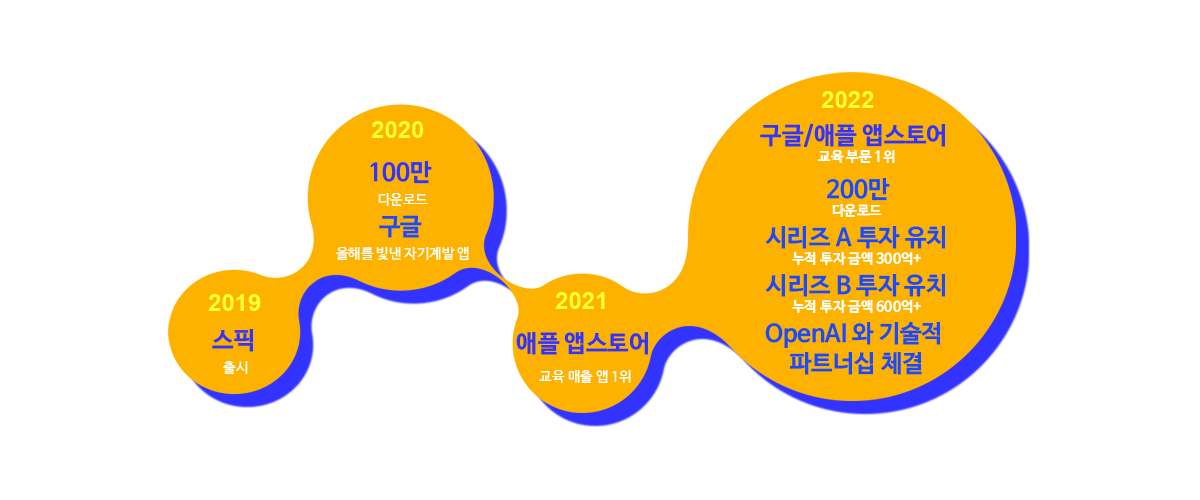
<style>
.page{position:relative;width:1200px;height:500px;background:#ffffff}
.page>*{position:absolute;margin:0}
.t1{font:24px "Arial-BoldMT";color:#ffff33}
.t2{font:24px/30px "NanumBarunGothicOTFBold";color:#1c49ff}
.t3{font:24px "NanumBarunGothicOTFBold";color:#3333ff}
.t4{font:14px/18px "NanumBarunGothicOTFBold";color:#ffffff}
.t5{font:24px/36px "NanumBarunGothicOTFBold";color:#1c49ff}
.t6{font:14px/24px "NanumBarunGothicOTF";color:#ffffff}
.t7{font:14px/30px "NanumBarunGothicOTF";color:#ffffff}
</style>
<div class="page">
<p class="t1" style="left:821px;top:91px;width:53px;height:17px">2022</p>
<p class="t1" style="left:371px;top:121px;width:53px;height:17px">2020</p>
<p class="t2" style="left:760px;top:123px;width:185px;height:252px;text-align:center"><span class="t3">구글/애플 앱스토어 <br></span><span class="t4">교육 부문 1위<br> </span><span class="t5">200만 <br></span><span class="t4">다운로드<br></span>시리즈 A 투자 유치<br><span class="t4">누적 투자 금액 300억+<br></span>시리즈 B 투자 유치<br><span class="t4">누적 투자 금액 600억+<br></span>OpenAI 와 기술적 <br>파트너십 체결</p>
<p class="t6" style="left:336px;top:161px;width:133px;height:99px;text-align:center"><span class="t3">100만 <br></span>다운로드<br><span class="t2">구글 <br></span>올해를 빛낸 자기계발 앱</p>
<p class="t1" style="left:208px;top:294px;width:53px;height:17px">2019</p>
<p class="t1" style="left:555px;top:292px;width:50px;height:17px">2021</p>
<p class="t3" style="left:212px;top:329px;width:41px;height:45px;text-align:center">스픽 <br><span class="t6">출시</span></p>
<p class="t7" style="left:516px;top:332px;width:132px;height:51px;text-align:center"><span class="t3">애플 앱스토어 <br></span>교육 매출 앱 1위</p>
</div>
